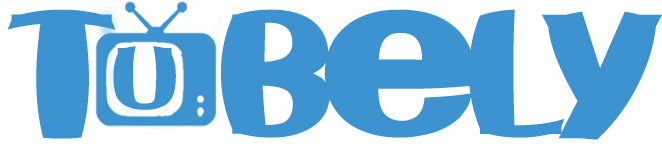
<style>
.page{position:relative;width:662px;height:149px;background:#3c93d0}
.page>*{position:absolute;margin:0}
.t1{font:127.8px "Fishbowl";letter-spacing:-0.02em;color:#3c93d0;scale:1.8 1}
.t2{font:63.5px "Fishbowl";color:#3c93d0;scale:1.85 1}
</style>
<div class="page">
<p class="t1" style="left:8px;top:9px;width:557px;height:130px">T BeL</p>
<p class="t1" style="left:542px;top:11px;width:120px;height:129px">y</p>
<p class="t2" style="left:113px;top:46px;width:63px;height:64px">U</p>
</div>
